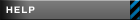
<style>
.page{position:relative;width:140px;height:20px}
.page>*{position:absolute;margin:0}
.t1{font:9px "SwitzerlandBold";letter-spacing:0.1em;color:#ffffff;scale:1.1 1}
</style>
<div class="page">
<p class="t1" style="left:6px;top:6px;width:29px;height:7px">HELP</p>
</div>
